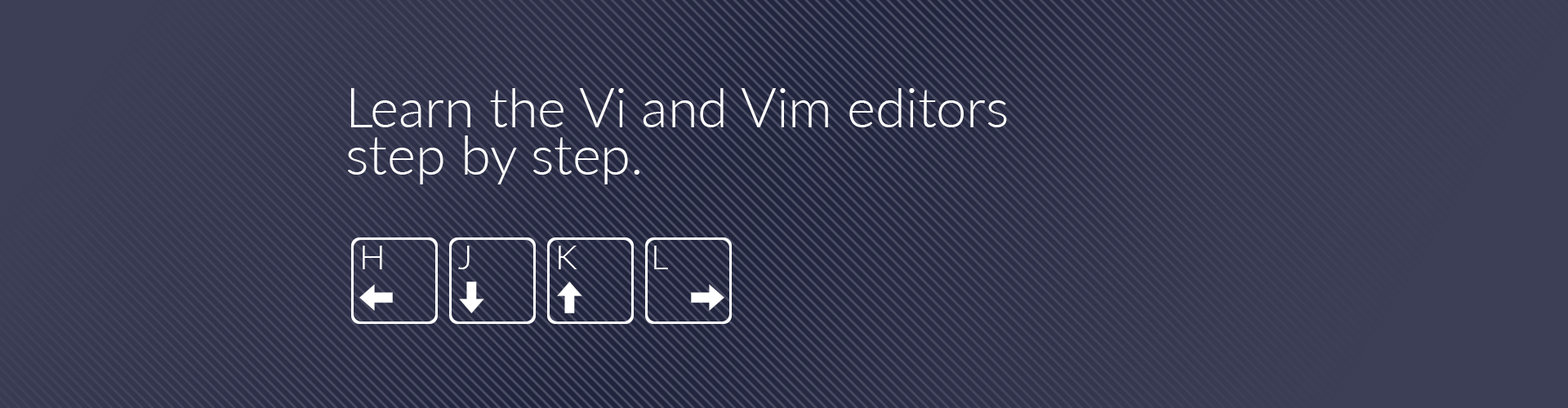
<style>
.page{position:relative;width:1568px;height:408px}
.page>*{position:absolute;margin:0}
.t1{font:54.4px/47.6px "Lato-Light";color:#ffffff}
.t2{font:34px "Lato-Light";color:#ffffff}
</style>
<div class="page">
<p class="t1" style="left:348px;top:88px;width:659px;height:97px">Learn the Vi and Vim editors <br>step by step.</p>
<p class="t2" style="left:363px;top:246px;width:305px;height:24px">H        J         K        L</p>
</div>
